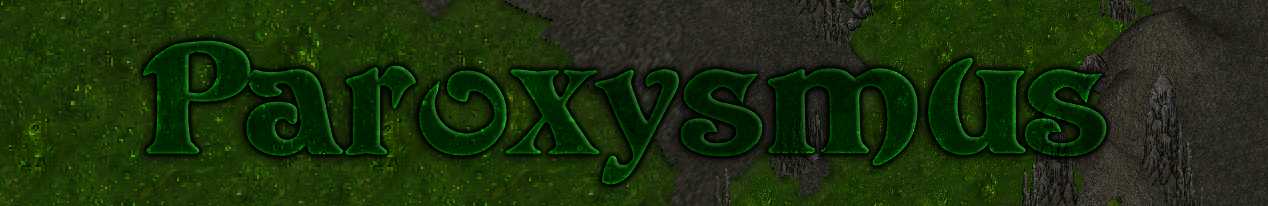
<style>
.page{position:relative;width:1268px;height:206px}
.page>*{position:absolute;margin:0}
.t1{font:156.7px "Avatar";color:#002600;scale:1.25 1}
</style>
<div class="page">
<p class="t1" style="left:143px;top:40px;width:964px;height:145px">Paroxysmus</p>
<p class="t1" style="left:143px;top:40px;width:964px;height:145px">Paroxysmus</p>
</div>
